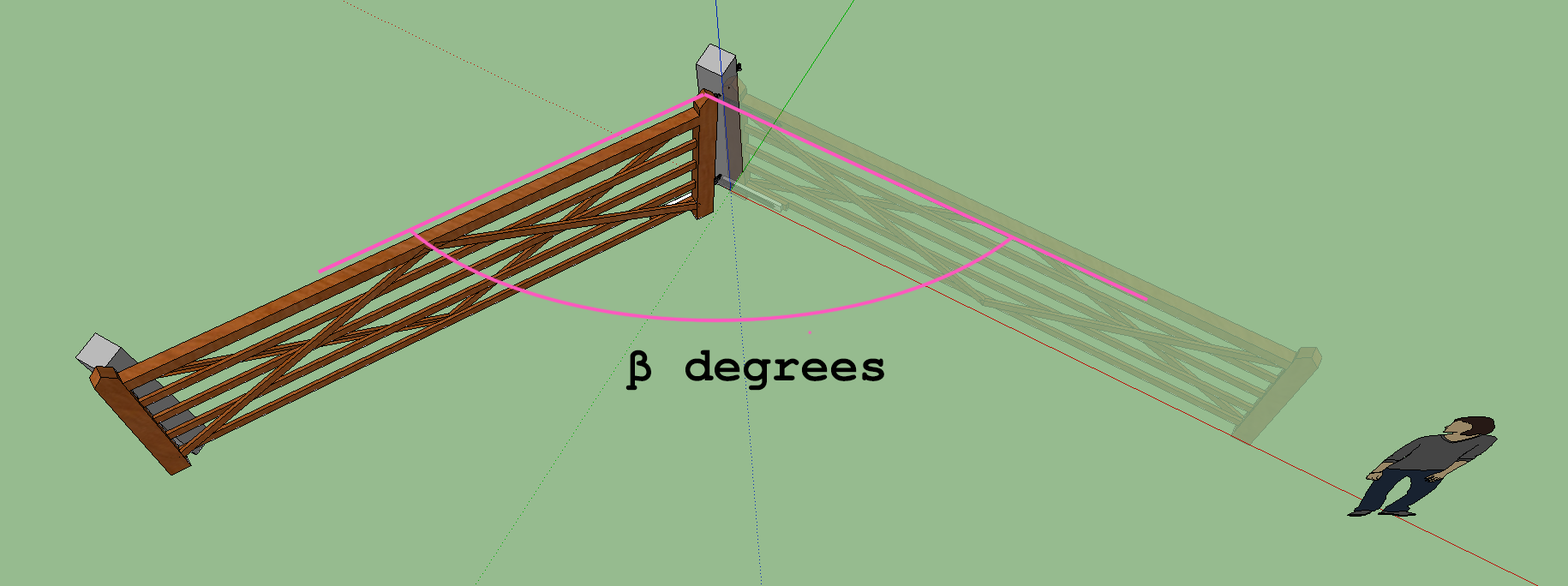
<style>
.page{position:relative;width:1568px;height:586px;background:#96bb8f}
.page>*{position:absolute;margin:0}
.t1{font:48.6px "FreeMonoBold";color:#010101}
</style>
<div class="page">
<p class="t1" style="left:625px;top:350px;width:259px;height:41px">β degrees</p>
</div>
